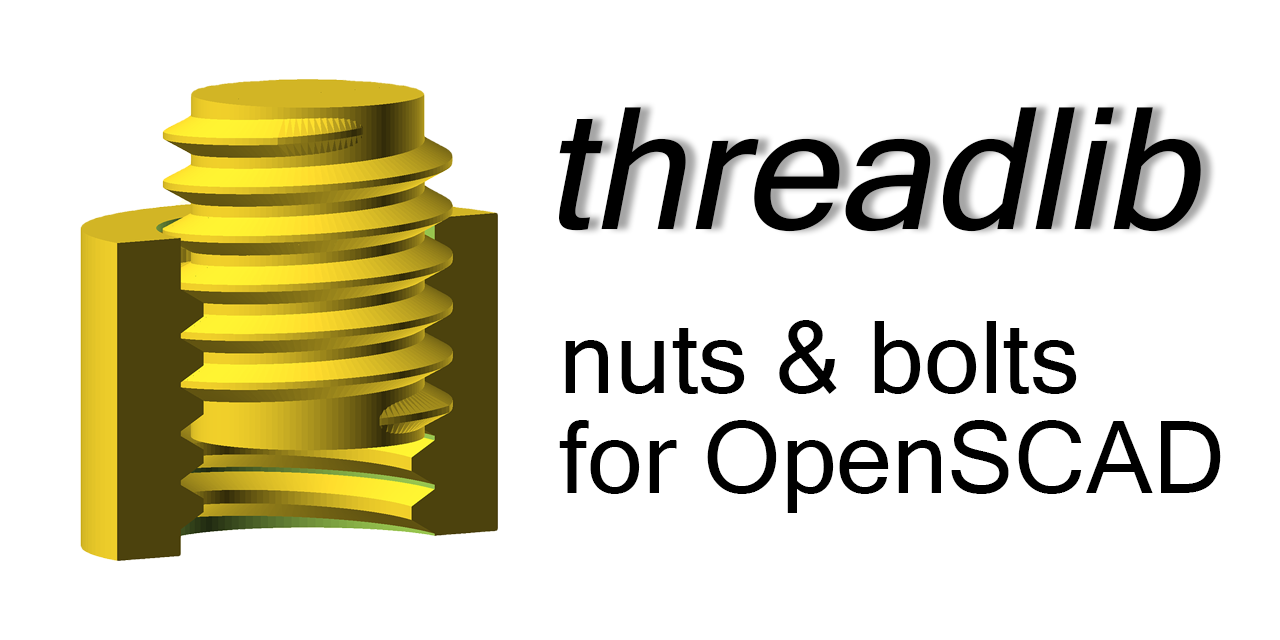
<style>
.page{position:relative;width:1280px;height:640px;background:#ffffff}
.page>*{position:absolute;margin:0}
.t1{font:170px "MicrosoftSansSerif";color:#000000;font-style:italic}
.t2{font:100px/14px "MicrosoftSansSerif";color:#000000}
.t3{font:100px/100px "MicrosoftSansSerif";color:#000000}
</style>
<div class="page">
<p class="t1" style="left:559px;top:107px;width:642px;height:125px">threadlib</p>
<p class="t2" style="left:559px;top:320px;width:662px;height:193px">nuts &amp; bolts<br><span class="t3">for OpenSCAD</span></p>
</div>
